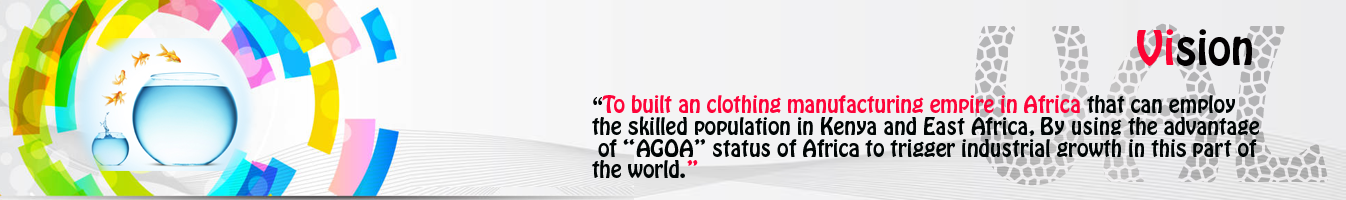
<style>
.page{position:relative;width:1346px;height:200px}
.page>*{position:absolute;margin:0}
.t1{font:42px "HoboStd";color:#030001}
.t2{font:42px "HoboStd";color:#fc0332}
.t3{font:20.8px/21.8px "HoboStd";color:#000505}
.t4{font:20.8px/21.8px "HoeflerText-Black";color:#000202}
.t5{font:20.8px/21.8px "HoboStd";color:#fe0439}
</style>
<div class="page">
<p class="t1" style="left:1137px;top:29px;width:115px;height:37px"><span class="t2">Vi</span>sion</p>
<p class="t3" style="left:592px;top:95px;width:667px;height:83px"><span class="t4">“</span><span class="t5">To built an clothing manufacturing empire in Africa </span>that can employ <br>the skilled population in Kenya and East Africa, By using the advantage<br> of “AGOA” status of Africa to trigger industrial growth in this part of <br>the world.<span class="t5">”</span></p>
</div>
